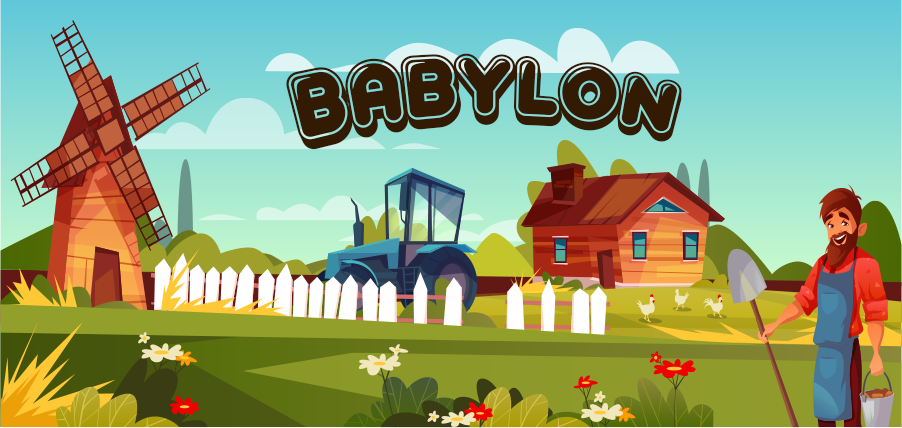
<style>
.page{position:relative;width:902px;height:428px}
.page>*{position:absolute;margin:0}
.t1{font:100px "Reglisse";color:#331a03}
</style>
<div class="page">
<p class="t1" style="left:286px;top:53px;width:396px;height:97px">BABYLON</p>
</div>
